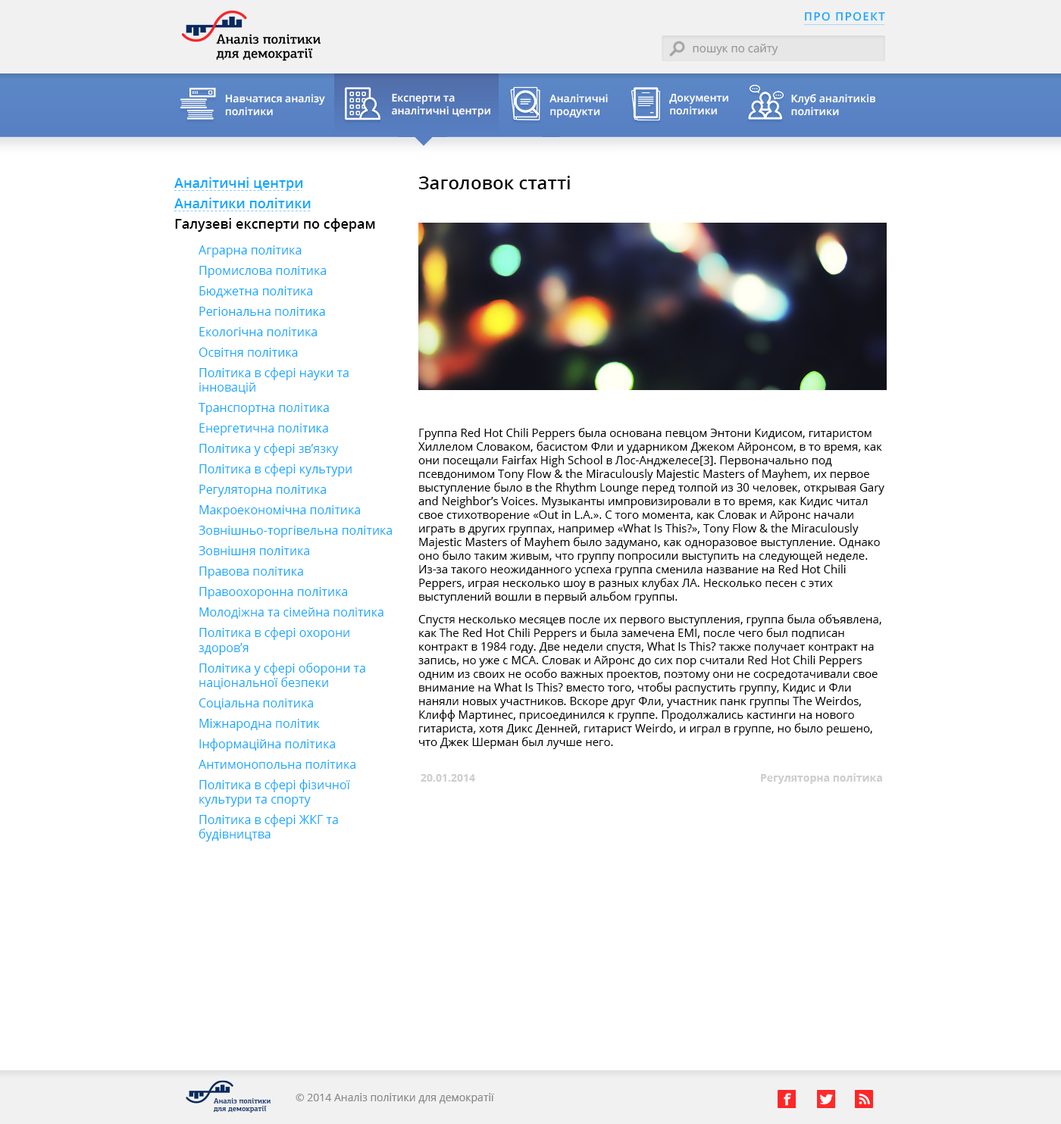
<style>
.page{position:relative;width:1061px;height:1124px;background:#ffffff}
.page>*{position:absolute;margin:0}
.t1{font:11.3px "OpenSans-Semibold";letter-spacing:0.075em;color:#0fa7ff}
.t2{font:11.4px "OpenSans";color:#959595}
.t3{font:10.6px "OpenSans-Semibold";color:#ffffff}
.t4{font:13.6px/20.5px "OpenSans-Semibold";color:#0fa7ff}
.t5{font:13.6px/20.5px "OpenSans-Semibold";color:#000000}
.t6{font:18.2px "OpenSans-Semibold";color:#000000}
.t7{font:12.1px/20.5px "OpenSans";color:#0fa7ff}
.t8{font:12.1px "OpenSans";color:#0fa7ff}
.t9{font:11.4px "OpenSans";color:#000000}
.t10{font:11.4px/22.7px "OpenSans";color:#000000}
.t11{font:10.6px "OpenSans-Bold";color:#cdcdcd}
.t12{font:10.6px "OpenSans";color:#878787}
</style>
<div class="page">
<p class="t1" style="left:805px;top:12px;width:80px;height:9px">ПРО ПРОЕКТ</p>
<p class="t2" style="left:692px;top:43px;width:86px;height:12px">пошук по сайту</p>
<p class="t3" style="left:225px;top:94px;width:100px;height:22px">Навчатися аналiзу<br>полiтики</p>
<p class="t3" style="left:392px;top:93px;width:98px;height:24px">Експерти та<br>аналiтичнi центри</p>
<p class="t3" style="left:549px;top:94px;width:59px;height:24px">Аналiтичнi<br>продукти</p>
<p class="t3" style="left:669px;top:93px;width:59px;height:22px">Документи<br>полiтики</p>
<p class="t3" style="left:791px;top:94px;width:84px;height:22px">Клуб аналiтикiв<br>полiтики</p>
<p class="t4" style="left:174px;top:177px;width:201px;height:55px">Аналітичнi центри<br>Аналітики політики<br><span class="t5">Галузеві експерти по сферам</span></p>
<p class="t6" style="left:419px;top:176px;width:151px;height:13px">Заголовок статтi</p>
<p class="t7" style="left:198px;top:245px;width:194px;height:597px">Аграрна політика<br>Промислова політика<br>Бюджетна політика<br>Регіональна політика<br>Екологічна політика<br>Освітня політика<br>Політика в сфері науки та <span class="t8">інновацій<br></span>Транспортна політика<br>Енергетична політика<br>Політика у сфері зв’язку<br>Політика в сфері культури<br>Регуляторна політика<br>Макроекономічна політика<br>Зовнішньо-торгівельна політика<br>Зовнішня політика<br>Правова політика<br>Правоохоронна політика<br>Молодіжна та сімейна політика<br>Політика в сфері охорони <span class="t8">здоров’я<br></span>Політика у сфері оборони та <span class="t8">національної безпеки<br></span>Соціальна політика<br>Міжнародна політик<br>Інформаційна політика<br>Антимонопольна політика<br>Політика в сфері фізичної <span class="t8">культури та спорту<br></span>Політика в сфері ЖКГ та <span class="t8">будівництва</span></p>
<p class="t9" style="left:418px;top:428px;width:466px;height:321px">Группа Red Hot Chili Peppers была основана певцом Энтони Кидисом, гитаристом Хиллелом Словаком, басистом Фли и ударником Джеком Айронсом, в то время, как они посещали Fairfax High School в Лос-Анджелесе[3]. Первоначально под псевдонимом Tony Flow &amp; the Miraculously Majestic Masters of Mayhem, их первое выступление было в the Rhythm Lounge перед толпой из 30 человек, открывая Gary and Neighbor’s Voices. Музыканты импровизировали в то время, как Кидис читал свое стихотворение «Out in L.A.». С того момента, как Словак и Айронс начали играть в других группах, например «What Is This?», Tony Flow &amp; the Miraculously Majestic Masters of Mayhem было задумано, как одноразовое выступление. Однако оно было таким живым, что группу попросили выступить на следующей неделе. Из-за такого неожиданного успеха группа сменила название на Red Hot Chili Peppers, играя несколько шоу в разных клубах ЛА. Несколько песен с этих выступлений вошли в первый альбом группы.<br><span class="t10">Спустя несколько месяцев после их первого выступления, группа была объявлена, </span>как The Red Hot Chili Peppers и была замечена EMI, после чего был подписан контракт в 1984 году. Две недели спустя, What Is This? также получает контракт на запись, но уже с MCA. Словак и Айронс до сих пор считали Red Hot Chili Peppers одним из своих не особо важных проектов, поэтому они не сосредотачивали свое внимание на What Is This? вместо того, чтобы распустить группу, Кидис и Фли наняли новых участников. Вскоре друг Фли, участник панк группы The Weirdos, Клифф Мартинес, присоединился к группе. Продолжались кастинги на нового гитариста, хотя Дикс Денней, гитарист Weirdo, и играл в группе, но было решено, что Джек Шерман был лучше него.</p>
<p class="t11" style="left:761px;top:774px;width:121px;height:10px">Регуляторна полiтика</p>
<p class="t11" style="left:420px;top:774px;width:55px;height:8px">20.01.2014</p>
<p class="t12" style="left:295px;top:1093px;width:200px;height:11px">© 2014 Аналiз полiтики для демократiї</p>
</div>
